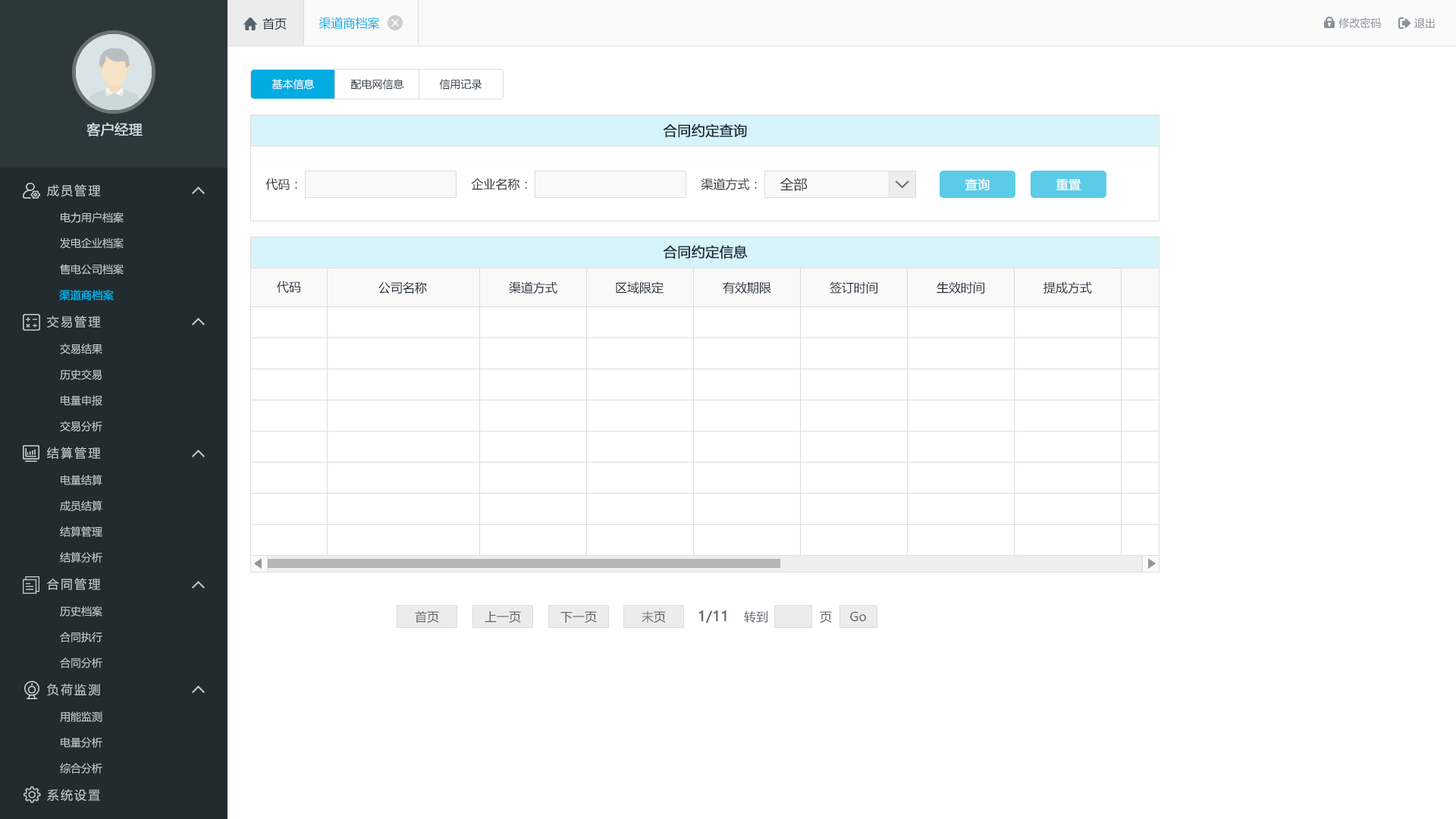
<style>
.page{position:relative;width:1456px;height:819px;background:#ffffff}
.page>*{position:absolute;margin:0}
.t1{font:12.1px "MicrosoftYaHei";color:#242e3b}
.t2{font:12.1px "MicrosoftYaHei";color:#00ace2}
.t3{font:10.6px "MicrosoftYaHei";color:#8a8f99}
.t4{font:10.6px "MicrosoftYaHei";color:#ffffff}
.t5{font:10.6px "MicrosoftYaHei";color:#242e3b}
.t6{font:13.6px "MicrosoftYaHei";color:#d1dce2;font-weight:bold}
.t7{font:13.6px "MicrosoftYaHei";color:#242e3b;font-weight:bold}
.t8{font:12.1px "MicrosoftYaHei";letter-spacing:0.14em;color:#c2cdd2}
.t9{font:12.1px "MicrosoftYaHei";color:#333333}
.t10{font:13.6px "MicrosoftYaHei";color:#333333}
.t11{font:12.1px "MicrosoftYaHei";color:#ffffff;font-weight:bold}
.t12{font:10.6px "MicrosoftYaHei";color:#c2cdd2}
.t13{font:10.6px "MicrosoftYaHei";color:#00ace2;font-weight:bold}
.t14{font:12.1px "MicrosoftYaHei";color:#61656b}
.t15{font:13.6px "MicrosoftYaHei";color:#61656b;font-weight:bold}
</style>
<div class="page">
<p class="t1" style="left:262px;top:17px;width:25px;height:13px">首页</p>
<p class="t2" style="left:318px;top:17px;width:62px;height:13px">渠道商档案</p>
<p class="t3" style="left:1338px;top:17px;width:43px;height:12px">修改密码</p>
<p class="t3" style="left:1414px;top:17px;width:21px;height:11px">退出</p>
<p class="t4" style="left:271px;top:79px;width:44px;height:10px">基本信息</p>
<p class="t5" style="left:350px;top:79px;width:54px;height:10px">配电网信息</p>
<p class="t5" style="left:439px;top:79px;width:43px;height:10px">信用记录</p>
<p class="t6" style="left:86px;top:122px;width:57px;height:14px">客户经理</p>
<p class="t7" style="left:663px;top:124px;width:84px;height:14px">合同约定查询</p>
<p class="t8" style="left:47px;top:184px;width:54px;height:13px">成员管理</p>
<p class="t9" style="left:265px;top:178px;width:32px;height:12px">代码：</p>
<p class="t9" style="left:471px;top:178px;width:56px;height:12px">企业名称：</p>
<p class="t9" style="left:701px;top:178px;width:56px;height:12px">渠道方式：</p>
<p class="t10" style="left:780px;top:177px;width:28px;height:14px">全部</p>
<p class="t11" style="left:965px;top:178px;width:25px;height:12px">查询</p>
<p class="t11" style="left:1056px;top:179px;width:25px;height:11px">重置</p>
<p class="t12" style="left:61px;top:212px;width:63px;height:11px">电力用户档案</p>
<p class="t12" style="left:60px;top:237px;width:64px;height:12px">发电企业档案</p>
<p class="t7" style="left:663px;top:245px;width:85px;height:14px">合同约定信息</p>
<p class="t12" style="left:60px;top:264px;width:64px;height:11px">售电公司档案</p>
<p class="t1" style="left:277px;top:281px;width:24px;height:12px">代码</p>
<p class="t1" style="left:378px;top:281px;width:49px;height:13px">公司名称</p>
<p class="t1" style="left:509px;top:281px;width:48px;height:13px">渠道方式</p>
<p class="t1" style="left:616px;top:281px;width:48px;height:13px">区域限定</p>
<p class="t1" style="left:723px;top:281px;width:48px;height:13px">有效期限</p>
<p class="t1" style="left:830px;top:281px;width:47px;height:12px">签订时间</p>
<p class="t1" style="left:937px;top:281px;width:47px;height:13px">生效时间</p>
<p class="t1" style="left:1043px;top:281px;width:49px;height:13px">提成方式</p>
<p class="t13" style="left:59px;top:290px;width:55px;height:11px">渠道商档案</p>
<p class="t8" style="left:47px;top:315px;width:54px;height:13px">交易管理</p>
<p class="t12" style="left:60px;top:344px;width:42px;height:10px">交易结果</p>
<p class="t12" style="left:60px;top:369px;width:42px;height:11px">历史交易</p>
<p class="t12" style="left:61px;top:395px;width:41px;height:11px">电量申报</p>
<p class="t12" style="left:60px;top:421px;width:42px;height:10px">交易分析</p>
<p class="t8" style="left:47px;top:447px;width:54px;height:13px">结算管理</p>
<p class="t12" style="left:61px;top:475px;width:41px;height:10px">电量结算</p>
<p class="t12" style="left:60px;top:500px;width:42px;height:11px">成员结算</p>
<p class="t12" style="left:60px;top:526px;width:42px;height:11px">结算管理</p>
<p class="t12" style="left:60px;top:552px;width:42px;height:11px">结算分析</p>
<p class="t8" style="left:47px;top:578px;width:54px;height:12px">合同管理</p>
<p class="t12" style="left:60px;top:606px;width:42px;height:11px">历史档案</p>
<p class="t14" style="left:415px;top:610px;width:24px;height:13px">首页</p>
<p class="t14" style="left:485px;top:611px;width:36px;height:12px">上一页</p>
<p class="t14" style="left:560px;top:611px;width:37px;height:12px">下一页</p>
<p class="t14" style="left:642px;top:610px;width:24px;height:13px">末页</p>
<p class="t15" style="left:698px;top:610px;width:28px;height:13px">1/11</p>
<p class="t14" style="left:744px;top:610px;width:23px;height:13px">转到</p>
<p class="t14" style="left:820px;top:611px;width:12px;height:12px">页</p>
<p class="t14" style="left:850px;top:611px;width:16px;height:11px">Go</p>
<p class="t12" style="left:60px;top:632px;width:42px;height:10px">合同执行</p>
<p class="t12" style="left:60px;top:657px;width:42px;height:11px">合同分析</p>
<p class="t8" style="left:47px;top:683px;width:53px;height:13px">负荷监测</p>
<p class="t12" style="left:60px;top:711px;width:42px;height:11px">用能监测</p>
<p class="t12" style="left:61px;top:737px;width:41px;height:11px">电量分析</p>
<p class="t12" style="left:60px;top:763px;width:42px;height:10px">综合分析</p>
<p class="t8" style="left:47px;top:789px;width:53px;height:13px">系统设置</p>
</div>
